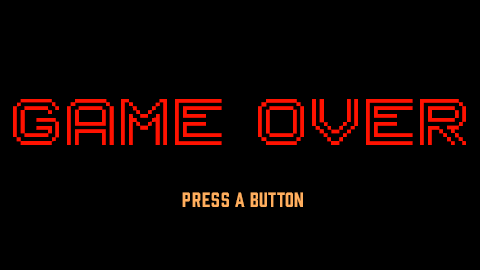
<style>
.page{position:relative;width:480px;height:270px;background:#000000}
.page>*{position:absolute;margin:0}
.t1{font:63.4px "PFUniform-Regular";color:#ff1200}
.t2{font:18.9px "Prohibition-Regular";letter-spacing:0.02em;color:#ffae5e}
.t3{font:18.9px "Prohibition-Regular";letter-spacing:0.06em;color:#ffae5e}
</style>
<div class="page">
<p class="t1" style="left:13px;top:99px;width:453px;height:46px">Game Over</p>
<p class="t2" style="left:182px;top:192px;width:121px;height:15px"><span class="t3">PRESS </span>A BUTTON</p>
</div>
